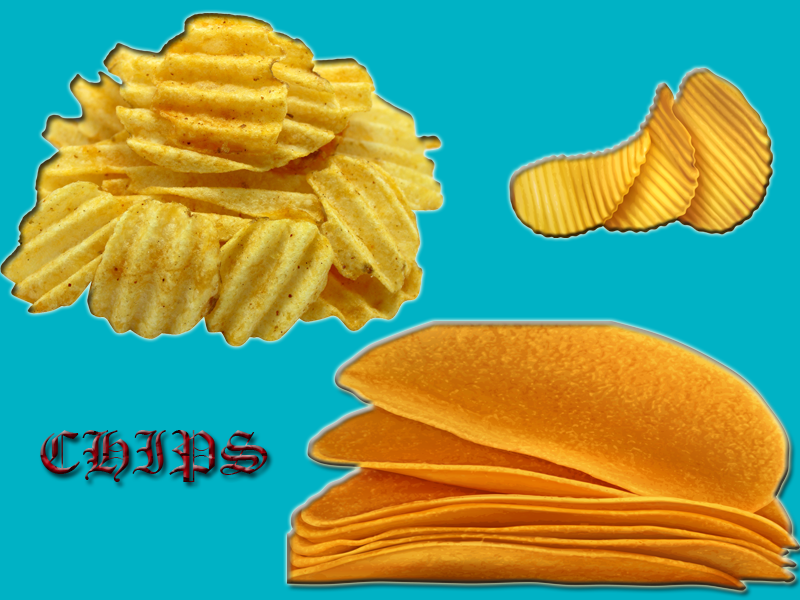
<style>
.page{position:relative;width:800px;height:600px;background:#00b2c5}
.page>*{position:absolute;margin:0}
.t1{font:60px "OldEnglishTextMT"}
</style>
<div class="page">
<p class="t1" style="left:40px;top:430px;width:228px;height:52px">CHIPS</p>
</div>
